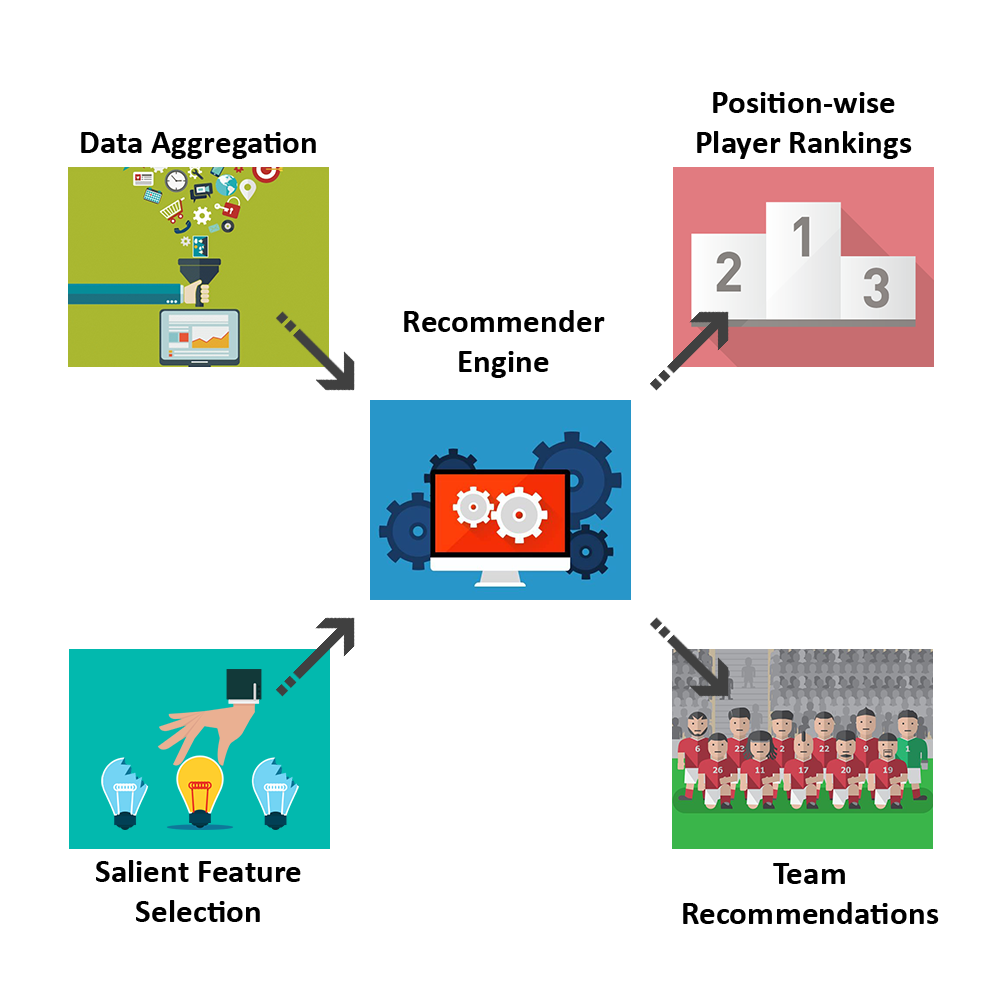
<style>
.page{position:relative;width:1000px;height:1000px;background:#ffffff}
.page>*{position:absolute;margin:0}
.t1{font:33.3px "Calibri-Bold";color:#000000}
</style>
<div class="page">
<p class="t1" style="left:697px;top:92px;width:215px;height:67px;text-align:center">Position-wise<br>Player Rankings</p>
<p class="t1" style="left:81px;top:132px;width:235px;height:27px">Data Aggregation</p>
<p class="t1" style="left:404px;top:310px;width:201px;height:68px;text-align:center">Recommender Engine</p>
<p class="t1" style="left:96px;top:860px;width:205px;height:62px;text-align:center">Salient Feature<br>Selection</p>
<p class="t1" style="left:683px;top:863px;width:256px;height:61px;text-align:center">Team Recommendations</p>
</div>
